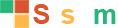
<style>
.page{position:relative;width:118px;height:28px;background:#ffffff}
.page>*{position:absolute;margin:0}
.t1{font:26.8px "Arial-BoldMT";letter-spacing:0.05em;color:#da542e}
.t2{font:26.8px "Arial-BoldMT";letter-spacing:0.05em;color:#ffffff}
.t3{font:26.8px "Arial-BoldMT";letter-spacing:0.05em;color:#ffb848}
.t4{font:26.8px "Arial-BoldMT";letter-spacing:0.05em;color:#28b779}
</style>
<div class="page">
<p class="t1" style="left:33px;top:4px;width:83px;height:20px">S<span class="t2">i</span><span class="t3">s</span><span class="t2">e</span><span class="t4">m</span></p>
</div>
